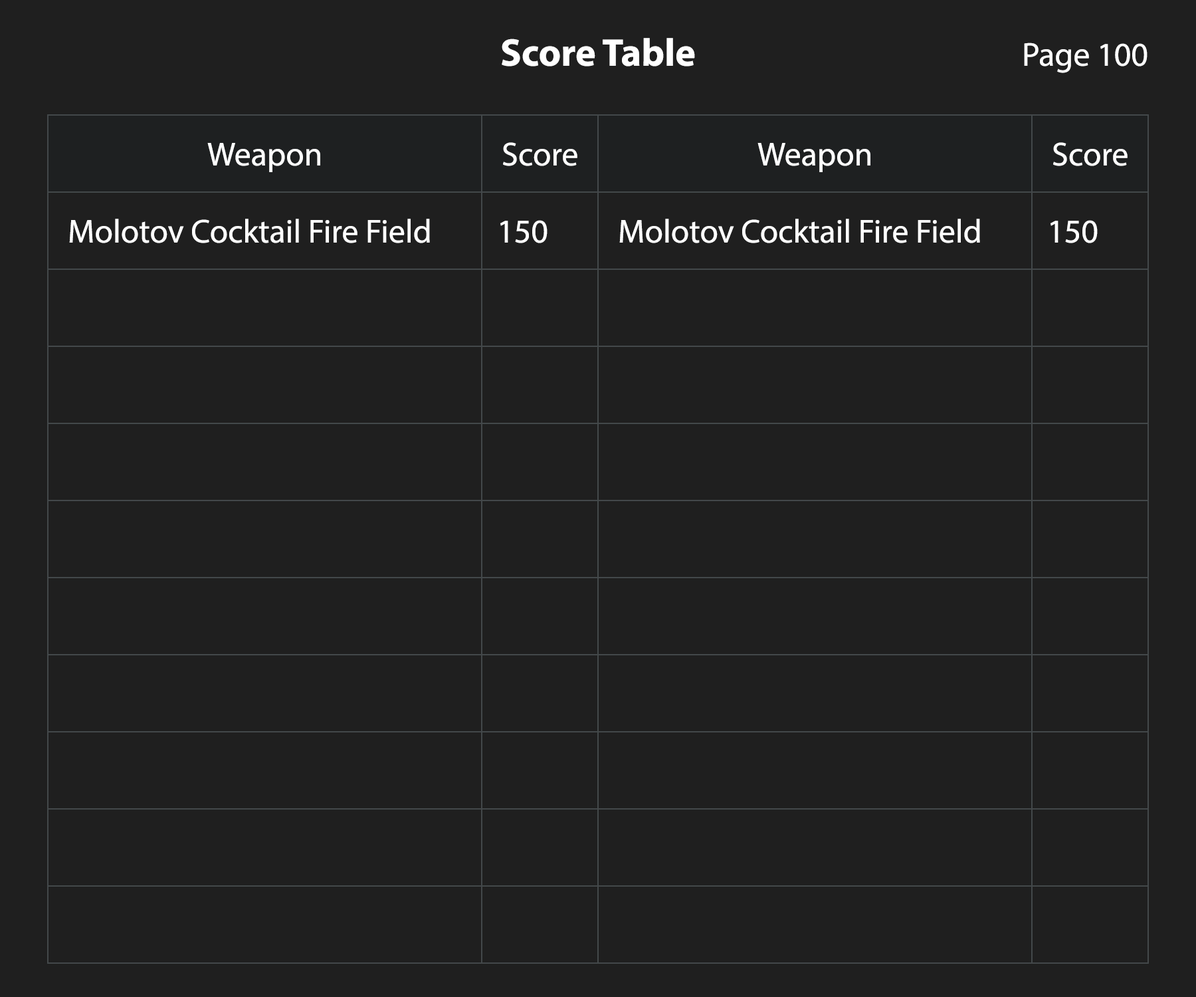
<style>
.page{position:relative;width:1196px;height:997px;background:#1f1f1f}
.page>*{position:absolute;margin:0}
.t1{font:38.8px "MyriadPro-Bold";color:#ffffff}
.t2{font:33.2px "MyriadPro-Regular";color:#ffffff}
</style>
<div class="page">
<p class="t1" style="left:502px;top:38px;width:193px;height:28px">Score Table</p>
<p class="t2" style="left:1024px;top:43px;width:124px;height:30px">Page 100</p>
<p class="t2" style="left:207px;top:143px;width:113px;height:29px">Weapon</p>
<p class="t2" style="left:503px;top:142px;width:75px;height:24px">Score</p>
<p class="t2" style="left:758px;top:143px;width:113px;height:29px">Weapon</p>
<p class="t2" style="left:1053px;top:142px;width:75px;height:24px">Score</p>
<p class="t2" style="left:69px;top:219px;width:361px;height:24px">Molotov Cocktail Fire Field</p>
<p class="t2" style="left:500px;top:220px;width:48px;height:23px">150</p>
<p class="t2" style="left:619px;top:219px;width:361px;height:24px">Molotov Cocktail Fire Field</p>
<p class="t2" style="left:1051px;top:220px;width:47px;height:23px">150</p>
</div>
